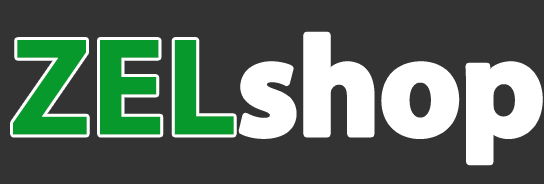
<style>
.page{position:relative;width:544px;height:184px;background:#333333}
.page>*{position:absolute;margin:0}
.t1{font:140px "MyriadPro-Bold";color:#ffffff}
.t2{font:140px "MyriadPro-Bold";color:#08992d}
</style>
<div class="page">
<p class="t1" style="left:13px;top:34px;width:527px;height:129px"><span class="t2">ZEL</span>shop</p>
</div>
